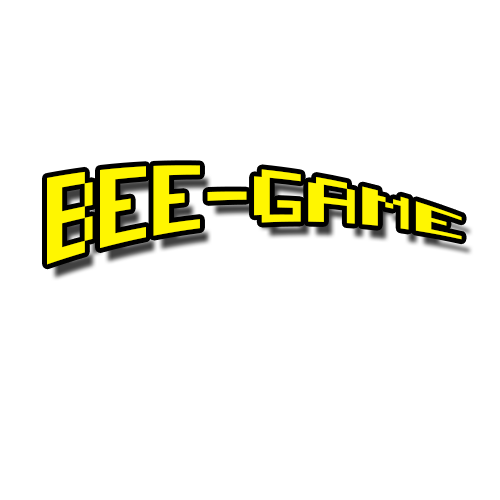
<style>
.page{position:relative;width:500px;height:500px;background:#ffffff}
.page>*{position:absolute;margin:0}
.t1{font:46px/64.7px "8-bit-pusab";color:#fff600}
</style>
<div class="page">
<p class="t1" style="left:47px;top:165px;width:415px;height:100px;text-align:center">BEE-GAME</p>
</div>
